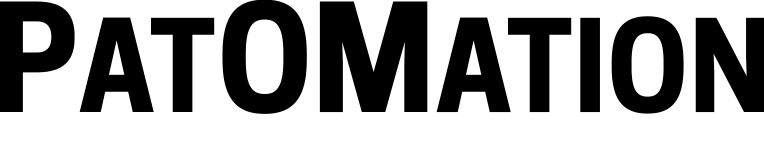
<style>
.page{position:relative;width:764px;height:157px;background:#ffffff}
.page>*{position:absolute;margin:0}
.t1{font:120.7px "CooperHewitt-Bold";color:#000000}
.t2{font:141.6px "CooperHewitt-Bold";color:#000000}
</style>
<div class="page">
<p class="t1" style="left:0px;top:0px;width:765px;height:114px"><span class="t2">P</span>AT<span class="t2">OM</span>ATION</p>
</div>
